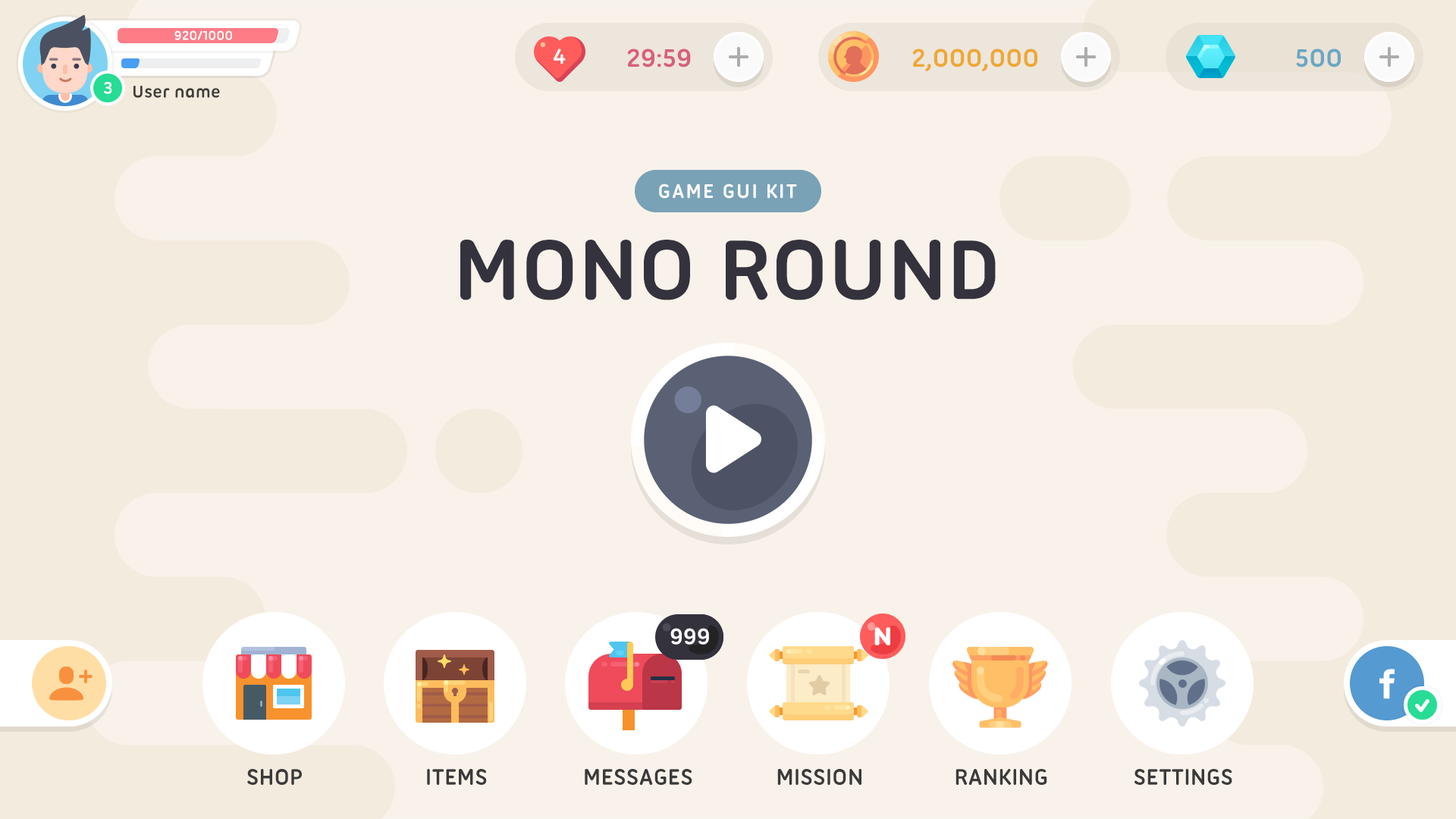
<style>
.page{position:relative;width:1456px;height:819px;background:#f8f2ea}
.page>*{position:absolute;margin:0}
.t1{font:13.6px "UbuntuTitling-Bold";color:#ffffff}
.t2{font:22.7px "UbuntuTitling-Bold";color:#ffffff;text-transform:uppercase}
.t3{font:27.3px "UbuntuTitling-Bold";color:#d85f7f;text-transform:uppercase}
.t4{font:27.3px "UbuntuTitling-Bold";color:#eea835;text-transform:uppercase}
.t5{font:27.3px "UbuntuTitling-Bold";color:#69a7c4;text-transform:uppercase}
.t6{font:18.2px "UbuntuTitling-Bold";color:#ffffff}
.t7{font:18.2px "UbuntuTitling-Bold";color:#3f3c38}
.t8{font:21.2px "UbuntuTitling-Bold";letter-spacing:0.07em;color:#ffffff;text-transform:uppercase}
.t9{font:91px "UbuntuTitling-Bold";color:#34323d;text-transform:uppercase}
.t10{font:24.3px "UbuntuTitling-Bold";color:#ffffff}
.t11{font:25.9px "UbuntuTitling-Bold";color:#ffffff;text-transform:uppercase;font-weight:bold;scale:1.11 1}
.t12{font:24.3px "UbuntuTitling-Bold";color:#3a3a3a;text-transform:uppercase}
</style>
<div class="page">
<p class="t1" style="left:174px;top:30px;width:58px;height:10px">920/1000</p>
<p class="t2" style="left:553px;top:49px;width:13px;height:15px">4</p>
<p class="t3" style="left:627px;top:49px;width:64px;height:18px">29:59</p>
<p class="t4" style="left:912px;top:49px;width:125px;height:22px">2,000,000</p>
<p class="t5" style="left:1296px;top:49px;width:45px;height:18px">500</p>
<p class="t6" style="left:104px;top:82px;width:8px;height:12px">3</p>
<p class="t7" style="left:133px;top:86px;width:87px;height:12px">User name</p>
<p class="t8" style="left:659px;top:184px;width:138px;height:15px">Game Gui Kit</p>
<p class="t9" style="left:460px;top:240px;width:536px;height:60px">Mono Round</p>
<p class="t10" style="left:670px;top:628px;width:39px;height:17px">999</p>
<p class="t11" style="left:874px;top:627px;width:16px;height:18px">N</p>
<p class="t12" style="left:247px;top:769px;width:55px;height:16px">shop</p>
<p class="t12" style="left:427px;top:769px;width:60px;height:16px">items</p>
<p class="t12" style="left:585px;top:769px;width:107px;height:16px">Messages</p>
<p class="t12" style="left:777px;top:769px;width:84px;height:16px">Mission</p>
<p class="t12" style="left:955px;top:769px;width:92px;height:16px">Ranking</p>
<p class="t12" style="left:1134px;top:769px;width:98px;height:16px">Settings</p>
</div>
